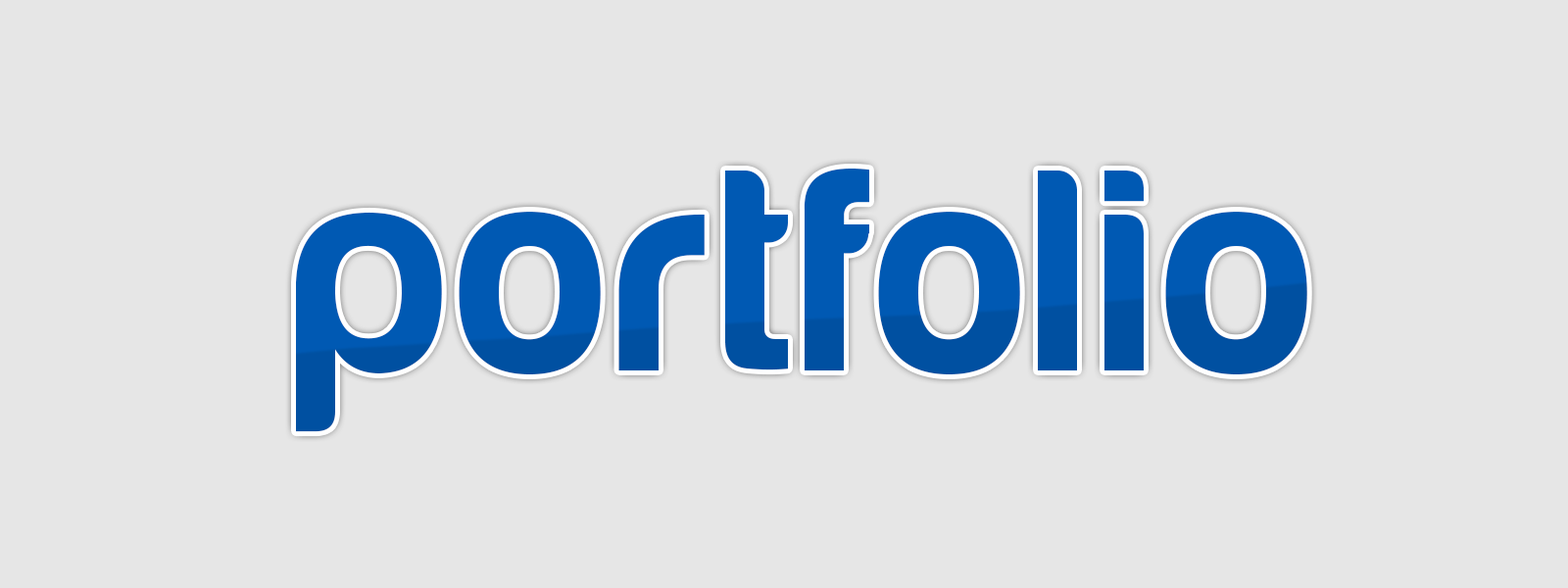
<style>
.page{position:relative;width:1568px;height:588px;background:#e6e6e6}
.page>*{position:absolute;margin:0}
.t1{font:294px "HarabaraMaisBold-HarabaraMaisBold";color:#0059b3}
</style>
<div class="page">
<p class="t1" style="left:296px;top:169px;width:1011px;height:263px">portfolio</p>
</div>
